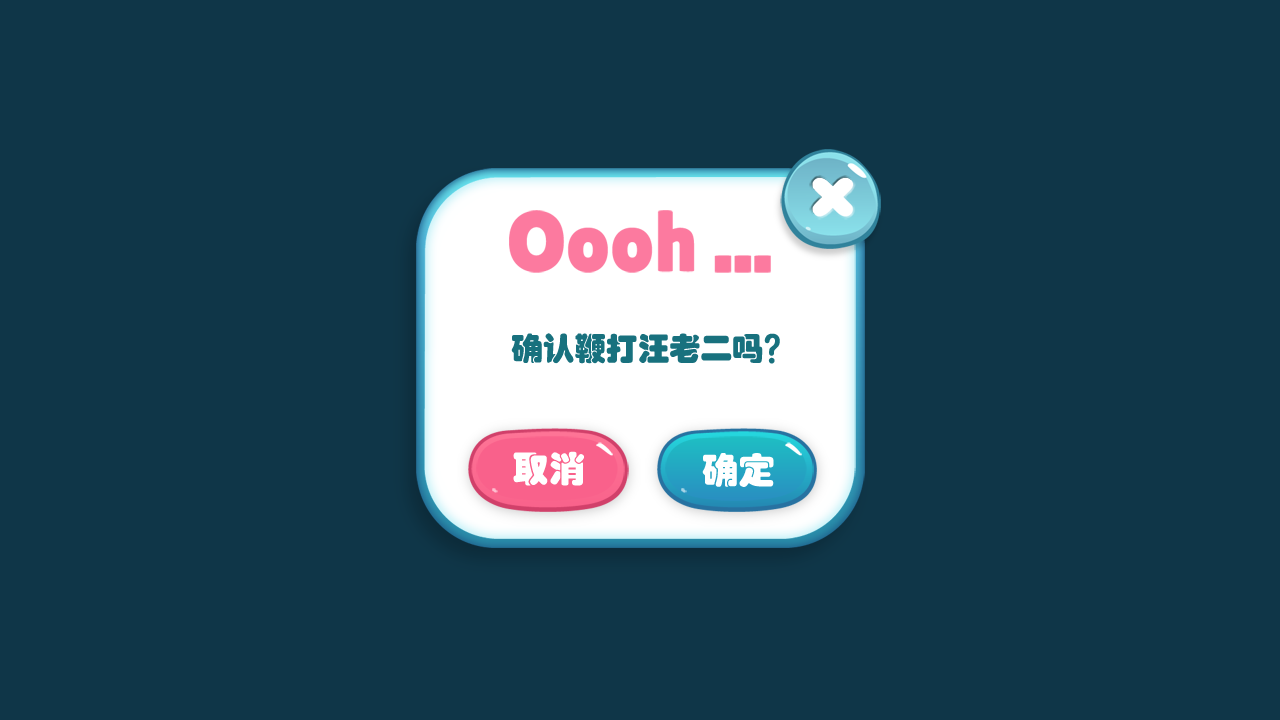
<style>
.page{position:relative;width:1280px;height:720px;background:#0f3648}
.page>*{position:absolute;margin:0}
.t1{font:31.6px "STHupo";color:#18717e}
.t2{font:36.2px "STHupo";color:#ffffff}
</style>
<div class="page">
<p class="t1" style="left:511px;top:333px;width:269px;height:31px">确认鞭打汪老二吗？</p>
<p class="t2" style="left:513px;top:451px;width:71px;height:35px">取消</p>
<p class="t2" style="left:702px;top:453px;width:72px;height:34px">确定</p>
</div>
